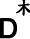
<style>
.page{position:relative;width:30px;height:39px;background:#ffffff}
.page>*{position:absolute;margin:0}
.t1{font:27px "ArialMT";color:#000000;font-weight:bold}
</style>
<div class="page">
<p class="t1" style="left:0px;top:18px;width:17px;height:21px">D</p>
</div>
